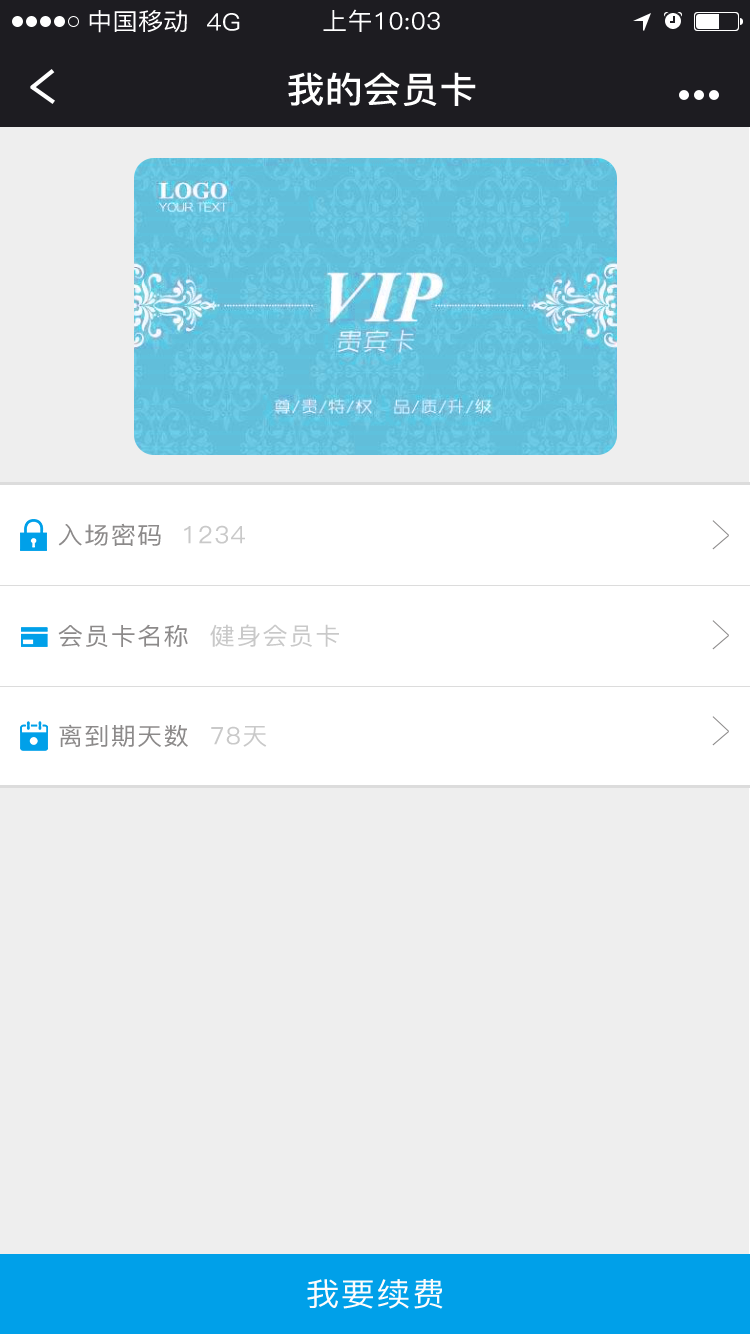
<style>
.page{position:relative;width:750px;height:1334px;background:#eeeeee}
.page>*{position:absolute;margin:0}
.t1{font:24px "PingFang-SC-Medium";letter-spacing:0.01em;color:#ffffff;scale:1.05 1}
.t2{font:36px "PingFang-SC-Bold";letter-spacing:0.01em;color:#ffffff;scale:1.05 1}
.t3{font:24px "PingFang-SC-Medium";letter-spacing:0.05em;color:#8c8a8a;scale:1.05 1}
.t4{font:24px "PingFang-SC-Medium";letter-spacing:0.05em;color:#c9c9c9;scale:1.05 1}
.t5{font:32px "PingFang-SC-Medium";letter-spacing:0.05em;color:#fdfcfc;scale:1.05 1}
</style>
<div class="page">
<p class="t1" style="left:89px;top:10px;width:98px;height:23px">中国移动</p>
<p class="t1" style="left:207px;top:13px;width:33px;height:18px">4G</p>
<p class="t1" style="left:323px;top:9px;width:117px;height:23px">上午10:03</p>
<p class="t2" style="left:288px;top:72px;width:188px;height:34px">我的会员卡</p>
<p class="t3" style="left:58px;top:523px;width:103px;height:23px">入场密码</p>
<p class="t4" style="left:184px;top:525px;width:61px;height:19px">1234</p>
<p class="t3" style="left:58px;top:624px;width:130px;height:23px">会员卡名称</p>
<p class="t4" style="left:210px;top:624px;width:129px;height:23px">健身会员卡</p>
<p class="t3" style="left:59px;top:724px;width:129px;height:23px">离到期天数</p>
<p class="t4" style="left:211px;top:726px;width:56px;height:21px">78天</p>
<p class="t5" style="left:307px;top:1279px;width:136px;height:30px">我要续费</p>
</div>
